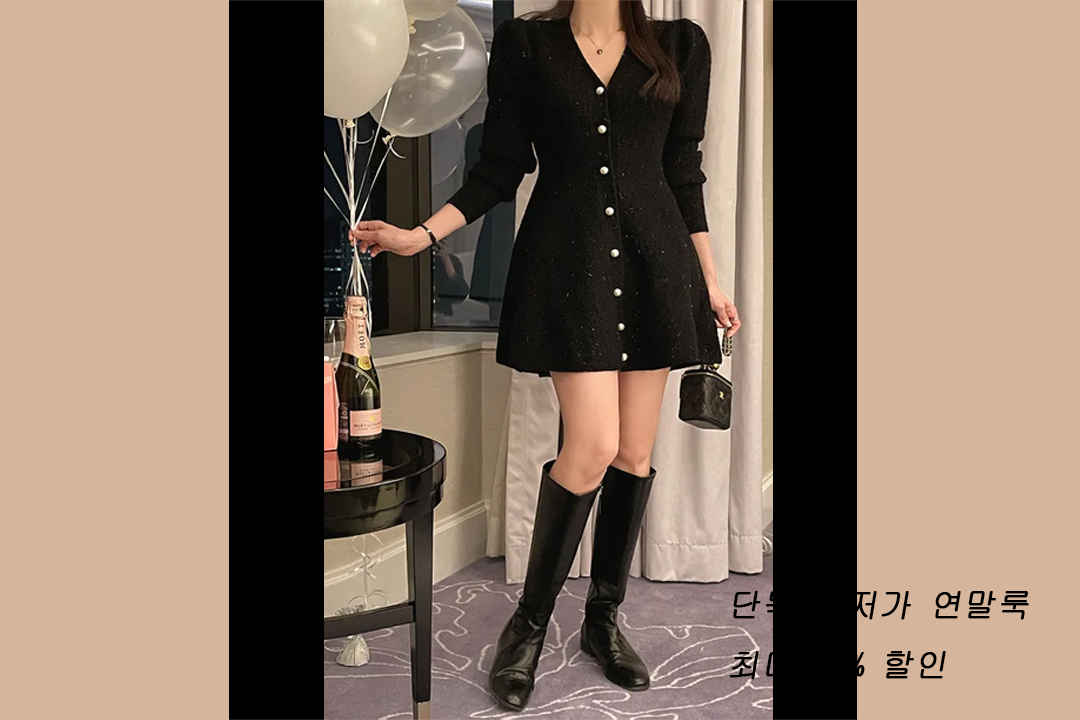
<style>
.page{position:relative;width:1080px;height:720px;background:#d5b69c}
.page>*{position:absolute;margin:0}
.t1{font:34.3px "GulimChe";color:#000000;font-weight:bold;font-style:italic;scale:0.95 1}
</style>
<div class="page">
<p class="t1" style="left:729px;top:591px;width:300px;height:89px">단독 최저가 연말룩<br>최대 45% 할인</p>
</div>
